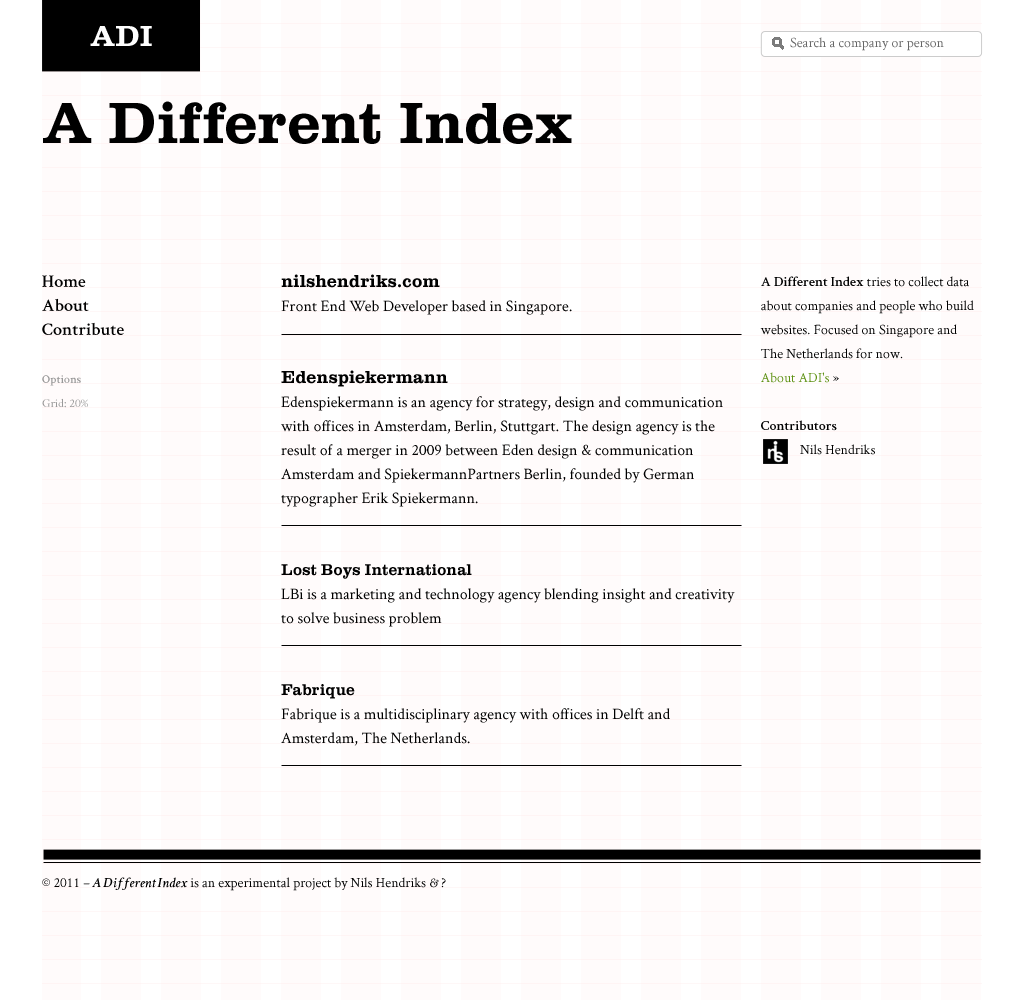
<style>
.page{position:relative;width:1024px;height:1000px;background:#fffbfb}
.page>*{position:absolute;margin:0}
.t1{font:30px "ClarendonFS-Bold";color:#fefefe}
.t2{font:14px "Crimson-Roman";color:#666666}
.t3{font:60px "ClarendonFS-Bold";color:#000000}
.t4{font:18px/24px "Crimson-Semibold";color:#000000}
.t5{font:16px/24px "Crimson-Roman";color:#000000}
.t6{font:18px/24px "ClarendonFS-Bold";color:#000000}
.t7{font:16px/24px "ClarendonFS-Bold";color:#000000}
.t8{font:14px/24px "Crimson-Roman";color:#000000}
.t9{font:14px/24px "Crimson-Semibold";color:#000000}
.t10{font:14px/24px "Crimson-Roman";color:#5d9112}
.t11{font:12px/24px "Crimson-Roman";color:#999999}
.t12{font:12px/24px "Crimson-Semibold";color:#999999}
.t13{font:14px "Crimson-Roman";color:#000000}
.t14{font:14px "Crimson-SemiboldItalic";color:#000000}
.t15{font:14px "Crimson-Italic";color:#000000}
</style>
<div class="page">
<p class="t1" style="left:90px;top:26px;width:62px;height:20px">ADI</p>
<p class="t2" style="left:790px;top:37px;width:154px;height:14px">Search a company or person</p>
<p class="t3" style="left:43px;top:101px;width:529px;height:43px">A Different Index</p>
<p class="t4" style="left:42px;top:275px;width:82px;height:60px">Home<br>About<br>Contribute</p>
<p class="t5" style="left:281px;top:274px;width:454px;height:472px"><span class="t6">nilshendriks.com<br></span>Front End Web Developer based in Singapore.<br><br><br><span class="t6">Edenspiekermann<br></span>Edenspiekermann is an agency for strategy, design and communication with offices in Amsterdam, Berlin, Stuttgart. The design agency is the result of a merger in 2009 between Eden design &amp; communication Amsterdam and SpiekermannPartners Berlin, founded by German typographer Erik Spiekermann.<br><br><br><span class="t7">Lost Boys International<br></span>LBi is a marketing and technology agency blending insight and creativity to solve business problem<br><br><br><span class="t7">Fabrique<br></span>Fabrique is a multidisciplinary agency with offices in Delft and Amsterdam, The Netherlands.</p>
<p class="t8" style="left:760px;top:276px;width:214px;height:179px"><span class="t9">A Different Index</span> tries to collect data about companies and people who build websites. Focused on Singapore and The Netherlands for now.<br><span class="t10">About ADI's </span>»<br><br><span class="t9">Contributors<br></span>    Nils Hendriks</p>
<p class="t11" style="left:42px;top:375px;width:46px;height:33px"><span class="t12">Options<br></span>Grid: 20%</p>
<p class="t13" style="left:42px;top:877px;width:404px;height:14px">© 2011 <span class="t14">– A Different Index</span> is an experimental project by Nils Hendriks <span class="t15">&amp;</span> ?</p>
</div>
